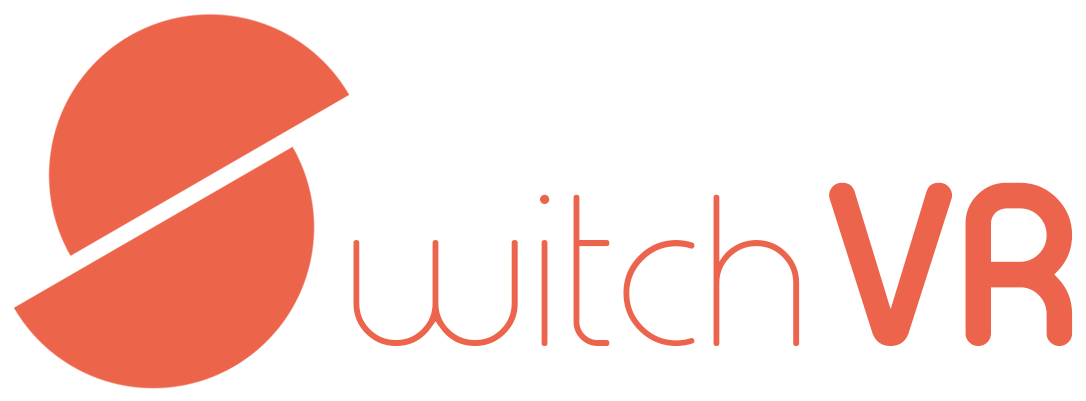
<style>
.page{position:relative;width:1086px;height:401px;background:#ffffff}
.page>*{position:absolute;margin:0}
.t1{font:214px "TypoRoundBoldDemo";color:#ec644b}
.t2{font:214px "TypoRoundThinDemo";color:#ec644b}
</style>
<div class="page">
<p class="t1" style="left:829px;top:182px;width:244px;height:164px">VR</p>
<p class="t2" style="left:353px;top:194px;width:447px;height:152px">witch</p>
</div>
